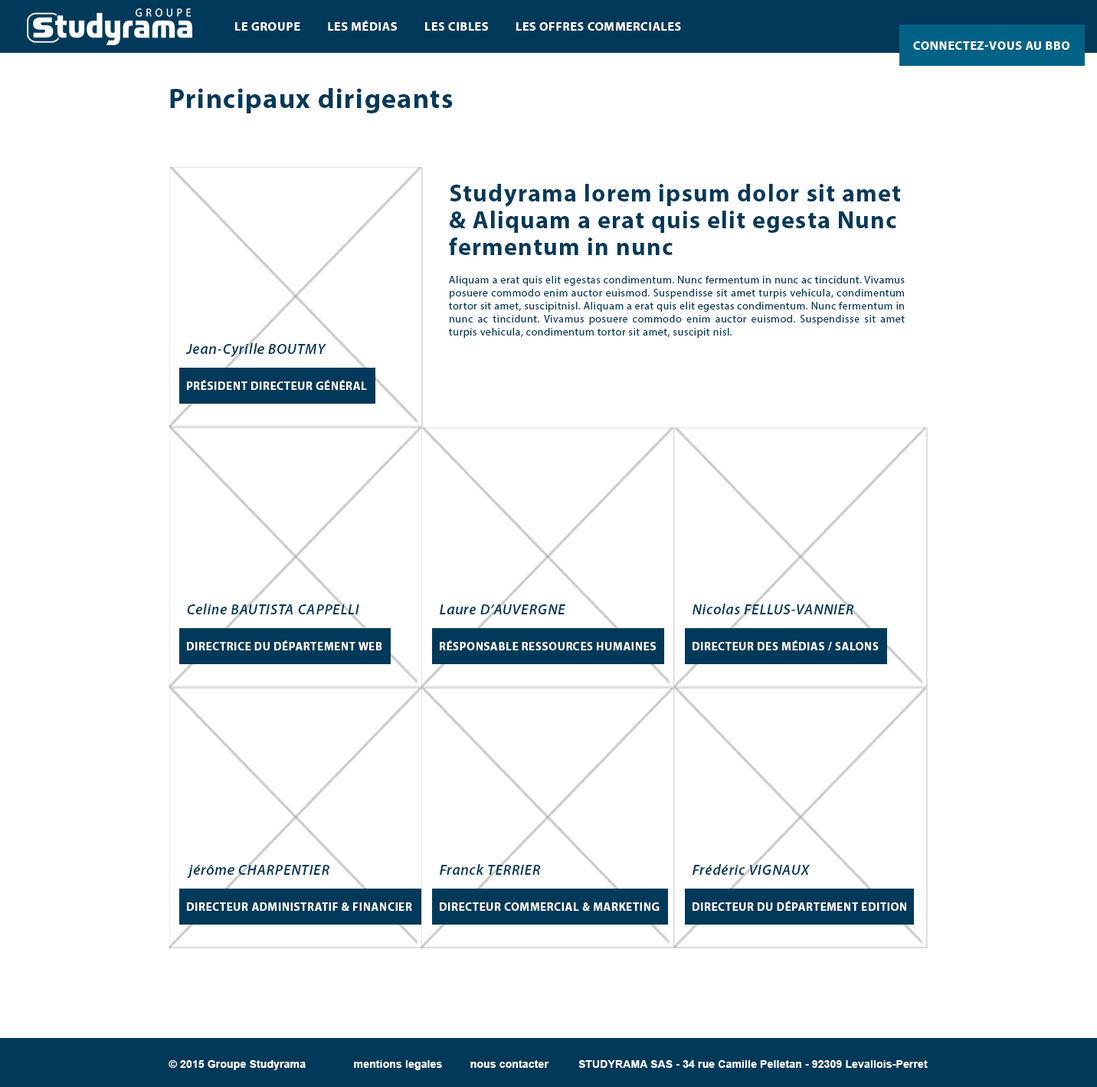
<style>
.page{position:relative;width:1097px;height:1087px;background:#ffffff}
.page>*{position:absolute;margin:0}
.t1{font:12.3px "MyriadPro-Bold";letter-spacing:0.04em;color:#ffffff;text-transform:uppercase}
.t2{font:27.6px "MyriadPro-Bold";letter-spacing:0.04em;color:#003959}
.t3{font:10.7px/13px "MyriadPro-Regular";letter-spacing:0.04em;color:#003959}
.t4{font:24.5px/26.8px "MyriadPro-Bold";letter-spacing:0.04em;color:#003959}
.t5{font:10.7px/28.3px "MyriadPro-Regular";letter-spacing:0.04em;color:#003959}
.t6{font:14.6px "MyriadPro-SemiboldIt";letter-spacing:0.04em;color:#003959}
.t7{font:14.6px "MyriadPro-SemiboldIt";letter-spacing:0.04em;color:#003959;text-transform:uppercase}
.t8{font:11.5px "MyriadPro-Bold";letter-spacing:0.04em;color:#ffffff;text-transform:uppercase}
.t9{font:10.7px "Arial-BoldMT";letter-spacing:0.01em;color:#ffffff}
.t10{font:10.7px "Arial-BoldMT";letter-spacing:0.01em;color:#ffffff;text-transform:uppercase}
</style>
<div class="page">
<p class="t1" style="left:235px;top:21px;width:446px;height:10px">Le groupe         Les médias         Les cibles         les offres commerciales</p>
<p class="t1" style="left:913px;top:41px;width:156px;height:9px">Connectez-vous au bbo</p>
<p class="t2" style="left:170px;top:88px;width:283px;height:25px">Principaux dirigeants</p>
<p class="t3" style="left:449px;top:184px;width:456px;height:154px"><span class="t4">Studyrama lorem ipsum dolor sit amet &amp; Aliquam a erat quis elit egesta Nunc fermentum in nunc <br></span><span class="t5">Aliquam a erat quis elit egestas condimentum. Nunc fermentum in nunc ac tincidunt. Vivamus </span>posuere commodo enim auctor euismod. Suspendisse sit amet turpis vehicula, condimentum tortor sit amet, suscipitnisl. Aliquam a erat quis elit egestas condimentum. Nunc fermentum in nunc ac tincidunt. Vivamus posuere commodo enim auctor euismod. Suspendisse sit amet turpis vehicula, condimentum tortor sit amet, suscipit nisl.</p>
<p class="t6" style="left:185px;top:343px;width:141px;height:14px">Jean-Cyrille <span class="t7">Boutmy</span></p>
<p class="t8" style="left:187px;top:380px;width:180px;height:10px">Président Directeur Général</p>
<p class="t7" style="left:187px;top:604px;width:172px;height:10px"><span class="t6">Celine </span>Bautista Cappelli</p>
<p class="t6" style="left:440px;top:604px;width:125px;height:10px">Laure D’AUVERGNE</p>
<p class="t6" style="left:693px;top:604px;width:161px;height:10px">Nicolas FELLUS-VANNIER</p>
<p class="t8" style="left:187px;top:640px;width:195px;height:10px">Directrice du département web</p>
<p class="t8" style="left:440px;top:640px;width:216px;height:10px">Résponsable Ressources Humaines</p>
<p class="t8" style="left:693px;top:640px;width:186px;height:10px">directeur des médias / salons</p>
<p class="t6" style="left:187px;top:865px;width:142px;height:13px">jérôme CHARPENTIER</p>
<p class="t6" style="left:440px;top:864px;width:101px;height:11px">Franck TERRIER</p>
<p class="t6" style="left:693px;top:864px;width:117px;height:11px">Frédéric VIGNAUX</p>
<p class="t8" style="left:187px;top:902px;width:225px;height:9px">Directeur administratif &amp; financier</p>
<p class="t8" style="left:440px;top:902px;width:220px;height:9px">directeur commercial &amp; marketing</p>
<p class="t8" style="left:693px;top:901px;width:213px;height:10px">directeur du département edition</p>
<p class="t9" style="left:169px;top:1060px;width:137px;height:10px">© <span class="t10">2015 G</span>roupe Studyrama</p>
<p class="t9" style="left:354px;top:1060px;width:194px;height:10px">mentions legales         nous contacter</p>
<p class="t9" style="left:578px;top:1060px;width:350px;height:8px">STUDYRAMA SAS - 34 rue Camille Pelletan - 92309 Levallois-Perret</p>
</div>
